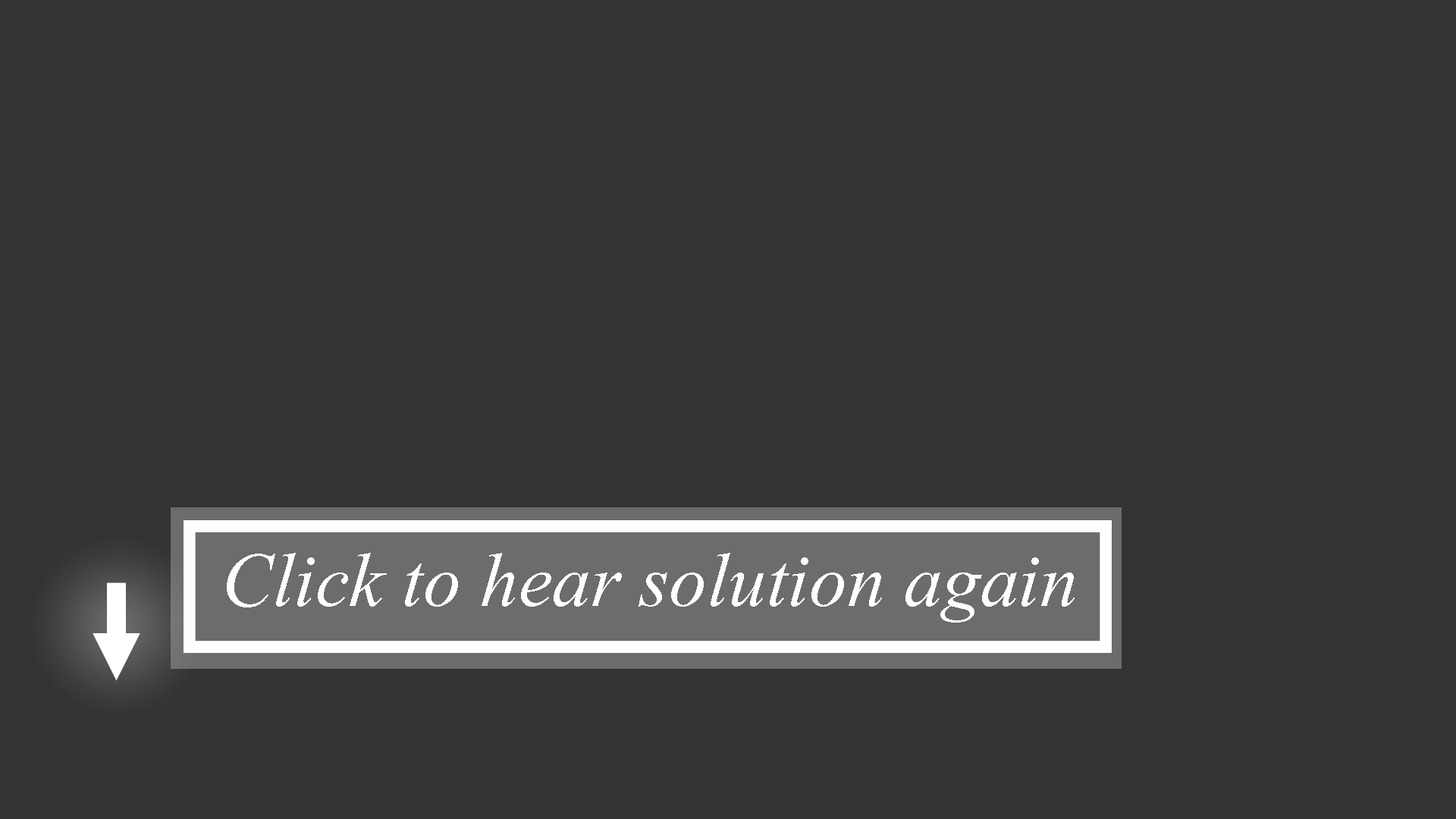
<style>
.page{position:relative;width:1456px;height:819px;background:#333333}
.page>*{position:absolute;margin:0}
.t1{font:94.8px "Vijaya";color:#ffffff}
</style>
<div class="page">
<p class="t1" style="left:227px;top:553px;width:848px;height:70px">Click to hear solution again</p>
</div>
